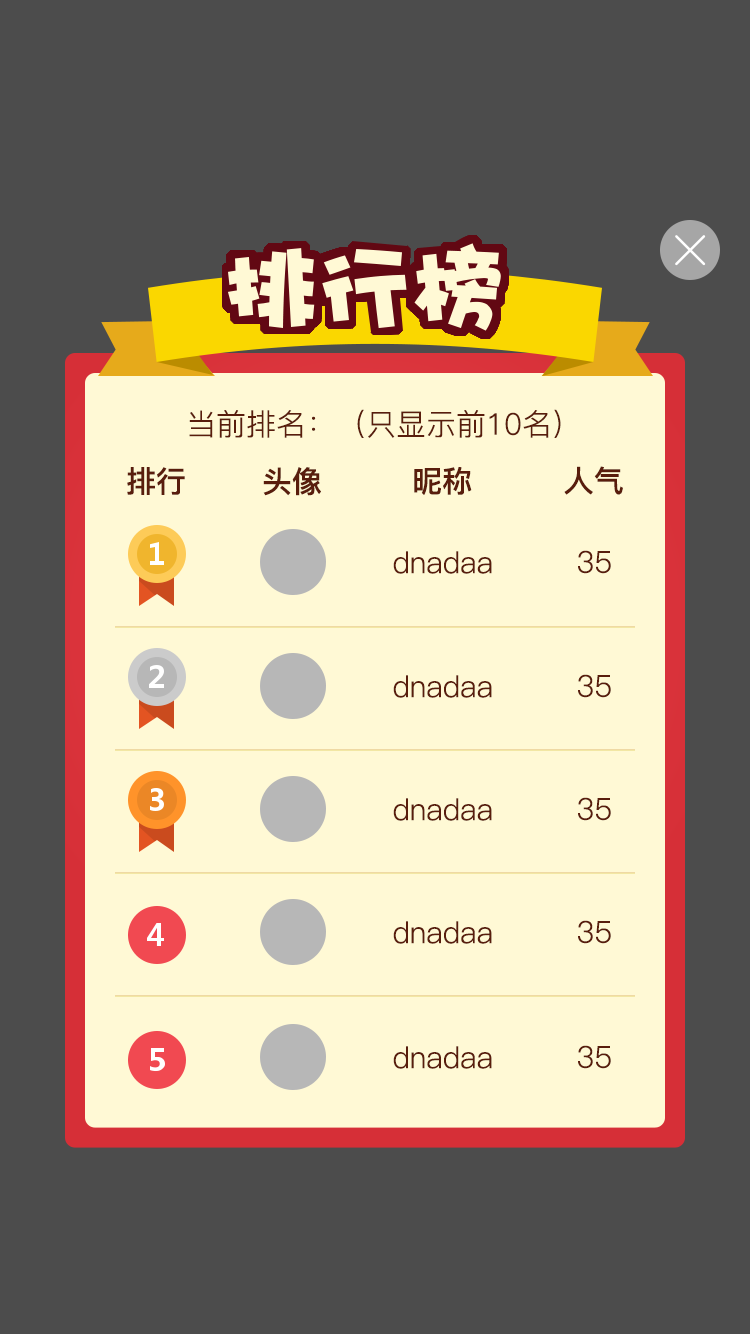
<style>
.page{position:relative;width:750px;height:1334px;background:#4c4c4c}
.page>*{position:absolute;margin:0}
.t1{font:30px "PingFang-SC-Regular";color:#591d0c}
.t2{font:30px "PingFang-SC-Bold";color:#591d0c}
</style>
<div class="page">
<p class="t1" style="left:189px;top:409px;width:372px;height:29px">当前排名：（只显示前10名）</p>
<p class="t2" style="left:127px;top:467px;width:58px;height:28px">排行</p>
<p class="t2" style="left:263px;top:467px;width:58px;height:29px">头像</p>
<p class="t2" style="left:414px;top:467px;width:58px;height:28px">昵称</p>
<p class="t2" style="left:564px;top:466px;width:59px;height:29px">人气</p>
<p class="t1" style="left:393px;top:551px;width:99px;height:23px">dnadaa</p>
<p class="t1" style="left:578px;top:550px;width:33px;height:24px">35</p>
<p class="t1" style="left:393px;top:675px;width:99px;height:23px">dnadaa</p>
<p class="t1" style="left:578px;top:674px;width:33px;height:24px">35</p>
<p class="t1" style="left:393px;top:798px;width:99px;height:23px">dnadaa</p>
<p class="t1" style="left:578px;top:797px;width:33px;height:24px">35</p>
<p class="t1" style="left:393px;top:921px;width:99px;height:23px">dnadaa</p>
<p class="t1" style="left:578px;top:920px;width:33px;height:24px">35</p>
<p class="t1" style="left:393px;top:1046px;width:99px;height:23px">dnadaa</p>
<p class="t1" style="left:578px;top:1045px;width:33px;height:24px">35</p>
</div>
